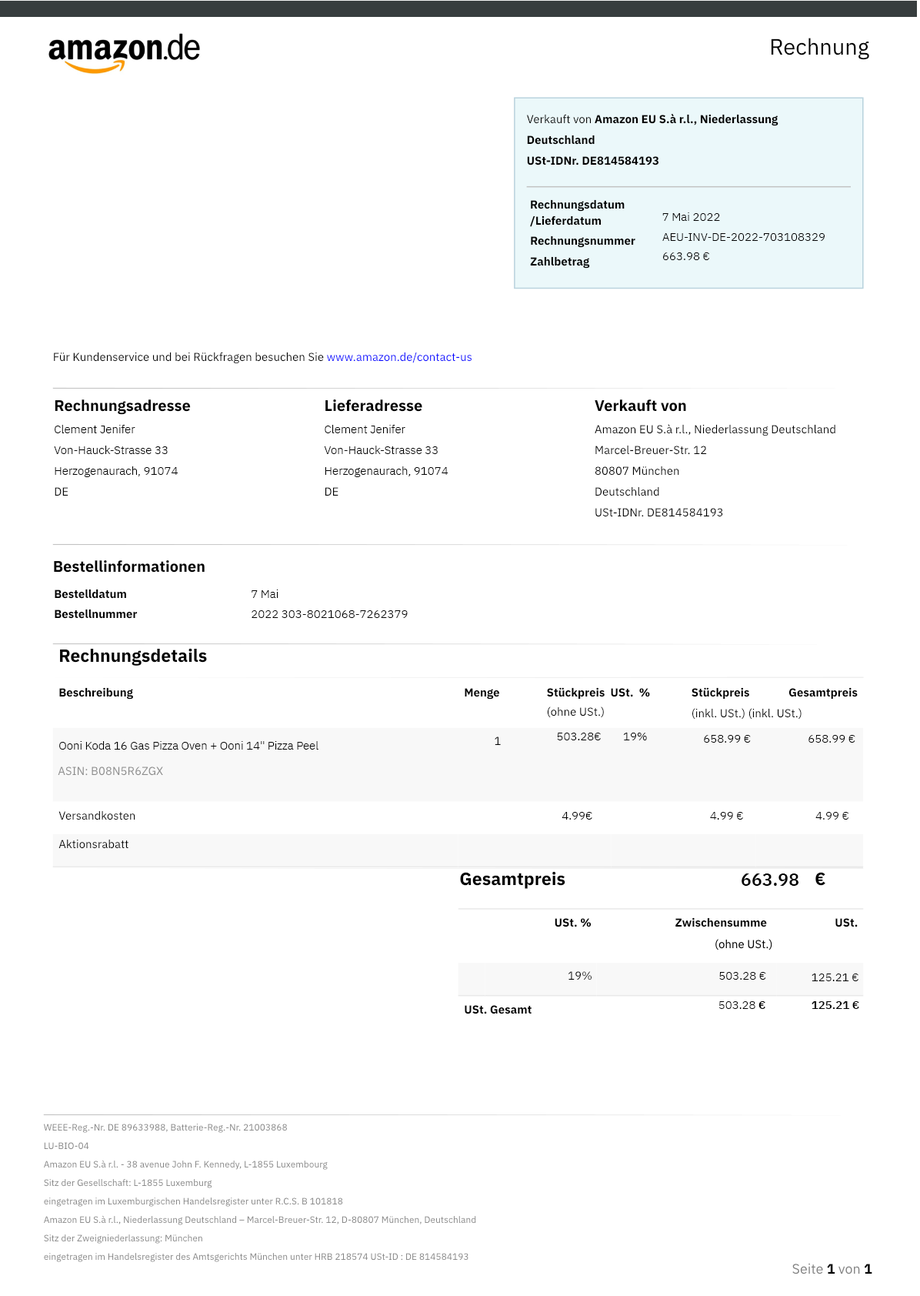
<style>
.page{position:relative;width:920px;height:1296px;background:#ffffff}
.page>*{position:absolute;margin:0}
.t1{font:22.3px "IBMPlexSans";color:#000000}
.t2{font:11.5px "IBMPlexSans-Bold";color:#000000}
.t3{font:11.5px "IBMPlexSans";color:#000000}
.t4{font:11.5px/16.2px "IBMPlexSans-Bold";color:#000000}
.t5{font:11.5px "IBMPlexSans-Light";color:#000000}
.t6{font:11.5px/12.7px "IBMPlexSans-Light";color:#000000}
.t7{font:11.5px/19.6px "IBMPlexSans-Light";color:#000000}
.t8{font:11.5px "IBMPlexSans";color:#0000ff}
.t9{font:15.4px "IBMPlexSans-Bold";color:#000000}
.t10{font:11.5px "IBMPlexSans";color:#020202}
.t11{font:17.7px "IBMPlexSans-Bold";color:#000000}
.t12{font:11.5px "IBMPlexSans";color:#050505}
.t13{font:11.5px "IBMPlexSans";color:#8b8b8b}
.t14{font:11.5px "IBMPlexSans";color:#030303}
.t15{font:17.7px "IBMPlexSans-SemiBold";color:#000000}
.t16{font:11.5px "IBMPlexSans-SemiBold";color:#000000}
.t17{font:9.2px "IBMPlexSans";color:#808080}
.t18{font:13.9px "IBMPlexSans";color:#808080}
.t19{font:13.9px "IBMPlexSans-Bold";color:#000000}
</style>
<div class="page">
<p class="t1" style="left:771px;top:38px;width:98px;height:22px">Rechnung</p>
<p class="t2" style="left:526px;top:113px;width:253px;height:13px"><span class="t3">Verkauft von </span>Amazon EU S.à r.l., Niederlassung</p>
<p class="t2" style="left:527px;top:135px;width:68px;height:10px">Deutschland</p>
<p class="t2" style="left:527px;top:156px;width:132px;height:9px">USt-IDNr. DE814584193</p>
<p class="t2" style="left:530px;top:199px;width:95px;height:28px">Rechnungsdatum <span class="t4"><br>/Lieferdatum</span></p>
<p class="t5" style="left:662px;top:212px;width:58px;height:9px">7 Mai 2022</p>
<p class="t6" style="left:662px;top:233px;width:163px;height:27px">AEU-INV-DE-2022-703108329 <span class="t7"><br>663.98 €</span></p>
<p class="t2" style="left:531px;top:235px;width:105px;height:13px">Rechnungsnummer</p>
<p class="t2" style="left:530px;top:256px;width:60px;height:13px">Zahlbetrag</p>
<p class="t3" style="left:54px;top:352px;width:418px;height:12px">Für Kundenservice und bei Rückfragen besuchen Sie <span class="t8">www.amazon.de/contact-us</span></p>
<p class="t9" style="left:55px;top:399px;width:136px;height:16px">Rechnungsadresse</p>
<p class="t9" style="left:325px;top:399px;width:97px;height:13px">Lieferadresse</p>
<p class="t9" style="left:595px;top:399px;width:91px;height:13px">Verkauft von</p>
<p class="t5" style="left:55px;top:425px;width:80px;height:8px">Clement Jenifer</p>
<p class="t5" style="left:325px;top:425px;width:81px;height:8px">Clement Jenifer</p>
<p class="t3" style="left:595px;top:424px;width:241px;height:12px">Amazon EU S.à r.l., Niederlassung Deutschland</p>
<p class="t5" style="left:54px;top:446px;width:114px;height:8px">Von-Hauck-Strasse 33</p>
<p class="t5" style="left:324px;top:446px;width:114px;height:8px">Von-Hauck-Strasse 33</p>
<p class="t3" style="left:596px;top:445px;width:111px;height:10px">Marcel-Breuer-Str. 12</p>
<p class="t5" style="left:55px;top:466px;width:123px;height:11px">Herzogenaurach, 91074</p>
<p class="t5" style="left:325px;top:466px;width:124px;height:11px">Herzogenaurach, 91074</p>
<p class="t3" style="left:595px;top:466px;width:84px;height:10px">80807 München</p>
<p class="t3" style="left:55px;top:487px;width:13px;height:9px">DE</p>
<p class="t3" style="left:325px;top:487px;width:14px;height:9px">DE</p>
<p class="t10" style="left:596px;top:486px;width:63px;height:10px">Deutschland</p>
<p class="t3" style="left:596px;top:508px;width:127px;height:9px">USt-IDNr. DE814584193</p>
<p class="t9" style="left:54px;top:560px;width:151px;height:12px">Bestellinformationen</p>
<p class="t2" style="left:55px;top:589px;width:71px;height:10px">Bestelldatum</p>
<p class="t5" style="left:252px;top:589px;width:27px;height:9px">7 Mai</p>
<p class="t2" style="left:55px;top:609px;width:83px;height:10px">Bestellnummer</p>
<p class="t5" style="left:252px;top:610px;width:156px;height:8px">2022 303-8021068-7262379</p>
<p class="t11" style="left:60px;top:648px;width:147px;height:18px">Rechnungsdetails</p>
<p class="t2" style="left:59px;top:687px;width:74px;height:12px">Beschreibung</p>
<p class="t2" style="left:465px;top:688px;width:35px;height:11px">Menge</p>
<p class="t2" style="left:547px;top:687px;width:103px;height:12px">Stückpreis  USt.  %</p>
<p class="t2" style="left:692px;top:687px;width:58px;height:12px">Stückpreis</p>
<p class="t2" style="left:789px;top:687px;width:69px;height:12px">Gesamtpreis</p>
<p class="t3" style="left:547px;top:706px;width:57px;height:12px">(ohne USt.)</p>
<p class="t12" style="left:692px;top:708px;width:110px;height:11px">(inkl. USt.) (inkl. USt.)</p>
<p class="t3" style="left:495px;top:736px;width:6px;height:9px">1</p>
<p class="t5" style="left:557px;top:733px;width:90px;height:7px">503.28€        19%</p>
<p class="t5" style="left:704px;top:735px;width:152px;height:8px">658.99 €                     658.99 €</p>
<p class="t5" style="left:59px;top:741px;width:260px;height:8px">Ooni Koda 16 Gas Pizza Oven + Ooni 14" Pizza Peel</p>
<p class="t13" style="left:58px;top:766px;width:105px;height:10px">ASIN: B08N5R6ZGX</p>
<p class="t14" style="left:58px;top:810px;width:77px;height:10px">Versandkosten</p>
<p class="t5" style="left:562px;top:812px;width:30px;height:7px">4.99€</p>
<p class="t5" style="left:710px;top:812px;width:33px;height:7px">4.99 €</p>
<p class="t5" style="left:816px;top:812px;width:33px;height:7px">4.99 €</p>
<p class="t3" style="left:58px;top:839px;width:70px;height:10px">Aktionsrabatt</p>
<p class="t11" style="left:460px;top:871px;width:106px;height:18px">Gesamtpreis</p>
<p class="t15" style="left:742px;top:873px;width:57px;height:13px">663.98</p>
<p class="t11" style="left:816px;top:872px;width:10px;height:14px">€</p>
<p class="t2" style="left:555px;top:918px;width:37px;height:9px">USt. %</p>
<p class="t2" style="left:676px;top:917px;width:91px;height:10px">Zwischensumme</p>
<p class="t2" style="left:836px;top:918px;width:22px;height:9px">USt.</p>
<p class="t3" style="left:716px;top:939px;width:57px;height:11px">(ohne USt.)</p>
<p class="t3" style="left:568px;top:971px;width:24px;height:9px">19%</p>
<p class="t5" style="left:719px;top:972px;width:47px;height:8px">503.28 €</p>
<p class="t5" style="left:812px;top:973px;width:47px;height:8px">125.21 €</p>
<p class="t5" style="left:719px;top:1001px;width:47px;height:8px">503.28<span class="t16"> €</span></p>
<p class="t16" style="left:812px;top:1001px;width:47px;height:8px">125.21 €</p>
<p class="t2" style="left:465px;top:1005px;width:67px;height:9px">USt. Gesamt</p>
<p class="t17" style="left:43px;top:1123px;width:245px;height:10px">WEEE-Reg.-Nr. DE 89633988, Batterie-Reg.-Nr. 21003868</p>
<p class="t17" style="left:44px;top:1142px;width:45px;height:8px">LU-BIO-04</p>
<p class="t17" style="left:44px;top:1160px;width:284px;height:10px">Amazon EU S.à r.l. - 38 avenue John F. Kennedy, L-1855 Luxembourg</p>
<p class="t17" style="left:44px;top:1179px;width:168px;height:9px">Sitz der Gesellschaft: L-1855 Luxemburg</p>
<p class="t17" style="left:44px;top:1197px;width:299px;height:9px">eingetragen im Luxemburgischen Handelsregister unter R.C.S. B 101818</p>
<p class="t17" style="left:44px;top:1215px;width:432px;height:10px">Amazon EU S.à r.l., Niederlassung Deutschland – Marcel-Breuer-Str. 12, D-80807 München, Deutschland</p>
<p class="t17" style="left:44px;top:1234px;width:158px;height:9px">Sitz der Zweigniederlassung: München</p>
<p class="t17" style="left:44px;top:1253px;width:425px;height:9px">eingetragen im Handelsregister des Amtsgerichts München unter HRB 218574 USt-ID : DE 814584193</p>
<p class="t18" style="left:793px;top:1263px;width:80px;height:11px">Seite <span class="t19">1</span> von <span class="t19">1</span></p>
</div>
